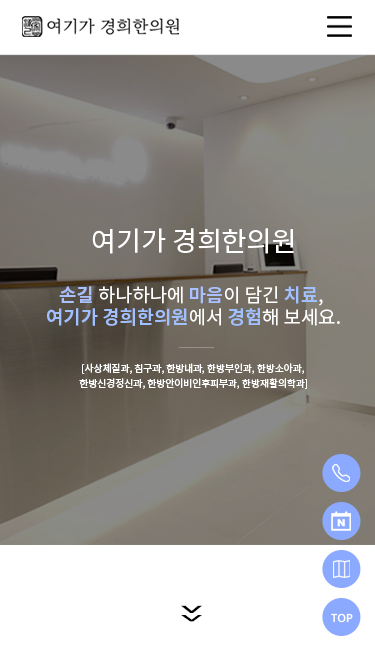
<style>
.page{position:relative;width:375px;height:667px;background:#ffffff}
.page>*{position:absolute;margin:0}
.t1{font:27.1px "NotoSansKR-Regular";color:#ffffff}
.t2{font:18.8px "NotoSansKR-Bold";color:#a1c0ff}
.t3{font:18.8px "NotoSansKR-Bold";color:#abc1ff}
.t4{font:18.8px "NotoSansKR-Regular";color:#ffffff}
.t5{font:9.8px "NotoSansKR-Regular";color:#ffffff}
.t6{font:55.7px "NotoSansKR-Light";color:#000000;scale:1.27 1}
.t7{font:48.8px "NotoSansKR-Light";color:#000000;scale:1.45 1}
.t8{font:11.1px "NotoSans-Medium";color:#ffffff}
</style>
<div class="page">
<p class="t1" style="left:92px;top:228px;width:202px;height:26px">여기가 경희한의원</p>
<p class="t2" style="left:47px;top:286px;width:293px;height:40px;text-align:center"><span class="t3">손길</span><span class="t4"> 하나하나에 </span><span class="t3">마음</span><span class="t4">이 담긴 </span>치료<span class="t4">, <br></span>여기가 경희한의원<span class="t4">에서 </span>경험<span class="t4">해 보세요.</span></p>
<p class="t5" style="left:82px;top:363px;width:222px;height:11px">[사상체질과, 침구과, 한방내과, 한방부인과, 한방소아과,</p>
<p class="t5" style="left:79px;top:378px;width:228px;height:11px">한방신경정신과, 한방안이비인후피부과, 한방재활의학과]</p>
<p class="t6" style="left:181px;top:605px;width:21px;height:8px;rotate:180deg">＾</p>
<p class="t7" style="left:181px;top:615px;width:21px;height:7px;rotate:180deg">＾</p>
<p class="t8" style="left:331px;top:613px;width:22px;height:10px">TOP</p>
</div>
